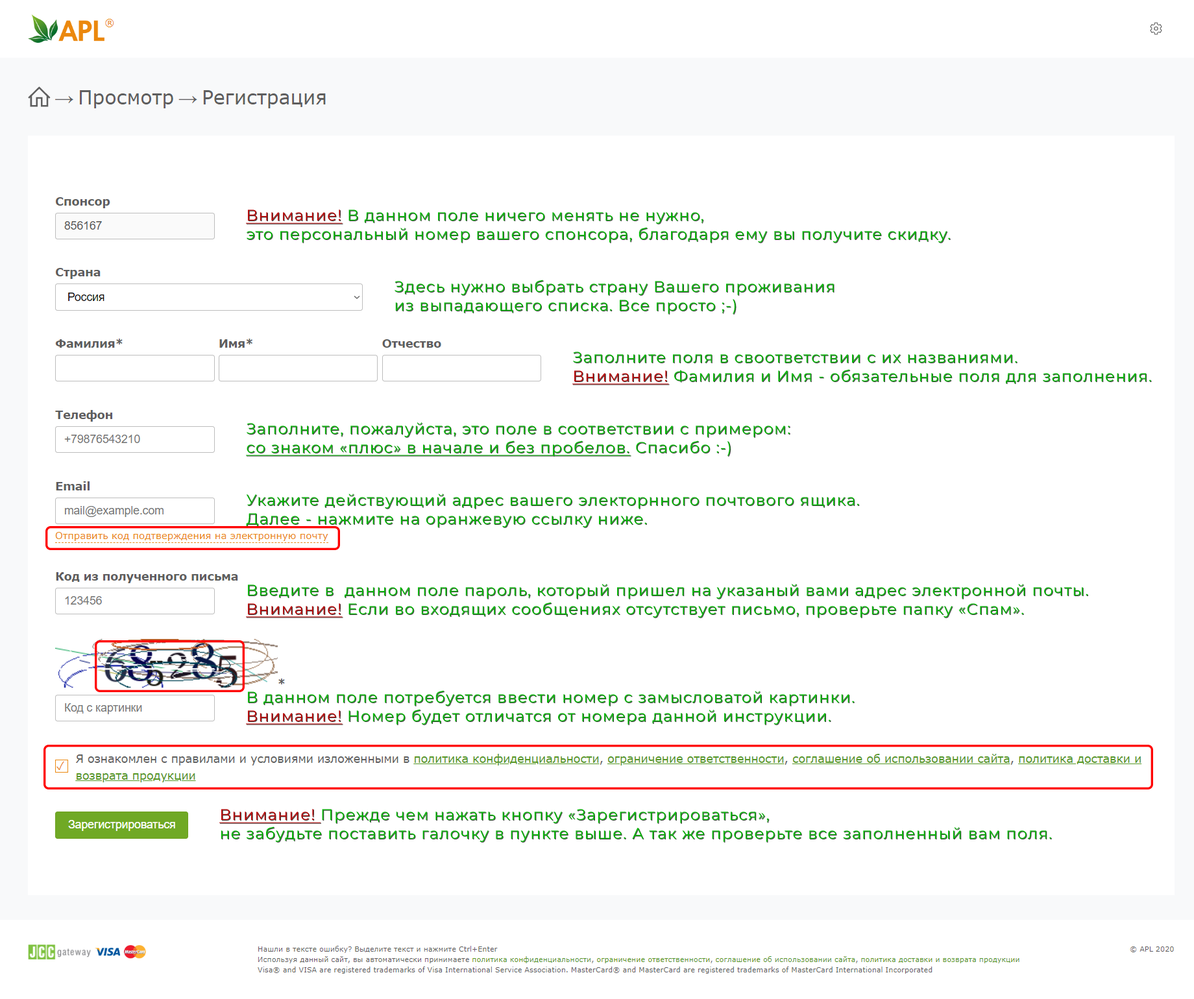
<style>
.page{position:relative;width:1194px;height:999px;background:#ffffff}
.page>*{position:absolute;margin:0}
.t1{font:15.6px "Montserrat-Regular";letter-spacing:0.05em;color:#00bf00}
.t2{font:15.6px "Montserrat-Regular";letter-spacing:0.05em;color:#bf0000;text-decoration:underline}
.t3{font:15.6px "Montserrat-Regular";letter-spacing:0.05em;color:#00bf00;text-decoration:underline}
</style>
<div class="page">
<p class="t1" style="left:246px;top:210px;width:704px;height:33px"><span class="t2">Внимание! </span>В данном поле ничего менять не нужно, <br>это персональный номер вашего спонсора, благодаря ему вы получите скидку.</p>
<p class="t1" style="left:394px;top:280px;width:440px;height:34px">Здесь нужно выбрать страну Вашего проживания <br>из выпадающего списка. Все просто ;-)</p>
<p class="t1" style="left:572px;top:352px;width:579px;height:33px">Заполните поля в своответствии с их названиями. <br><span class="t2">Внимание! </span>Фамилия и Имя - обязательные поля для заполнения.</p>
<p class="t1" style="left:246px;top:422px;width:543px;height:34px">Заполните, пожалуйста, это поле в соответствии с примером:<br><span class="t3">со знаком «плюс» в начале и без пробелов.</span> Спасибо :-)</p>
<p class="t1" style="left:246px;top:494px;width:613px;height:33px">Укажите действующий адрес вашего электорнного почтового ящика. <br>Далее - нажмите на оранжевую ссылку ниже.</p>
<p class="t1" style="left:246px;top:584px;width:841px;height:34px">Введите в  данном поле пароль, который пришел на указаный вами адрес электронной почты. <br><span class="t2">Внимание!</span> Если во входящих сообщениях отсутствует письмо, проверьте папку «Спам».</p>
<p class="t1" style="left:246px;top:690px;width:608px;height:35px">В данном поле потребуется ввести номер с замысловатой картинки.<br><span class="t2">Внимание!</span> Номер будет отличатся от номера данной инструкции.</p>
<p class="t1" style="left:219px;top:809px;width:832px;height:33px"><span class="t2">Внимание! </span>Прежде чем нажать кнопку «Зарегистрироваться», <br>не забудьте поставить галочку в пункте выше. А так же проверьте все заполненный вам поля.</p>
</div>
